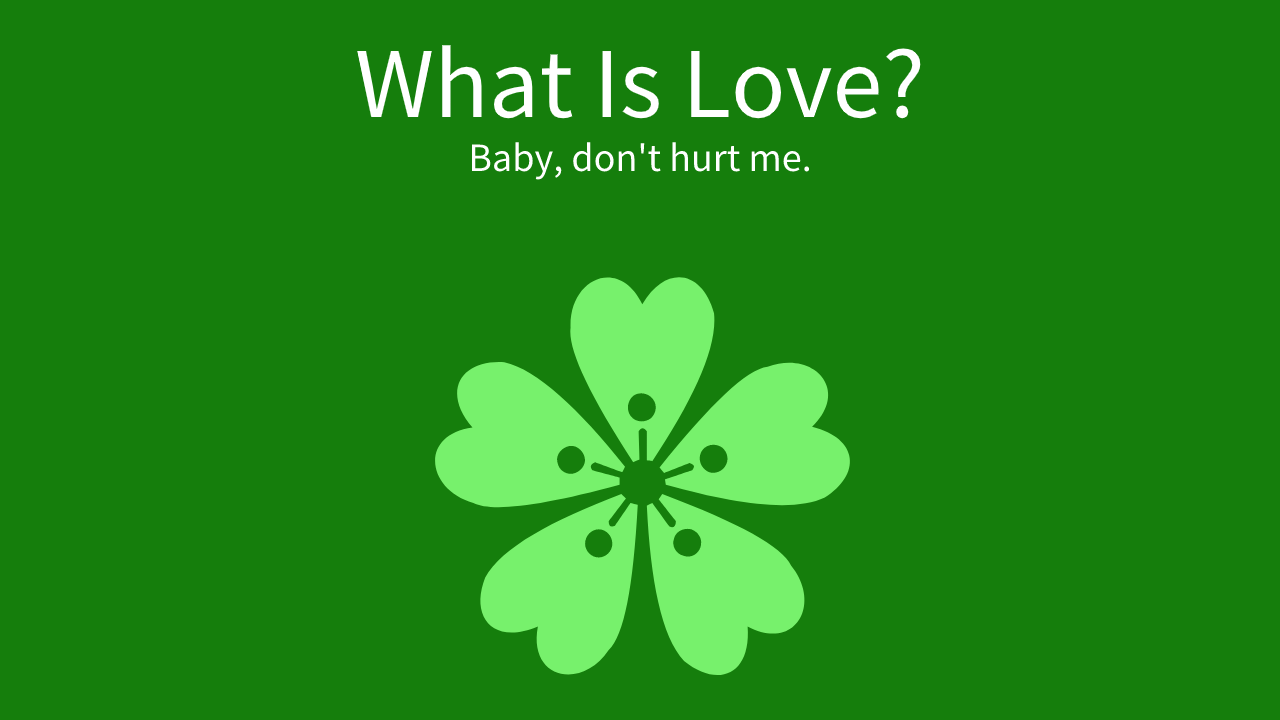
<style>
.page{position:relative;width:1280px;height:720px;background:#157e0c}
.page>*{position:absolute;margin:0}
.t1{font:90px "SourceHanSansSC-Regular";color:#ffffff}
.t2{font:36px "SourceHanSansSC-Regular";color:#ffffff}
</style>
<div class="page">
<p class="t1" style="left:357px;top:45px;width:564px;height:74px">What Is Love?</p>
<p class="t2" style="left:471px;top:142px;width:339px;height:38px">Baby, don't hurt me.</p>
</div>
